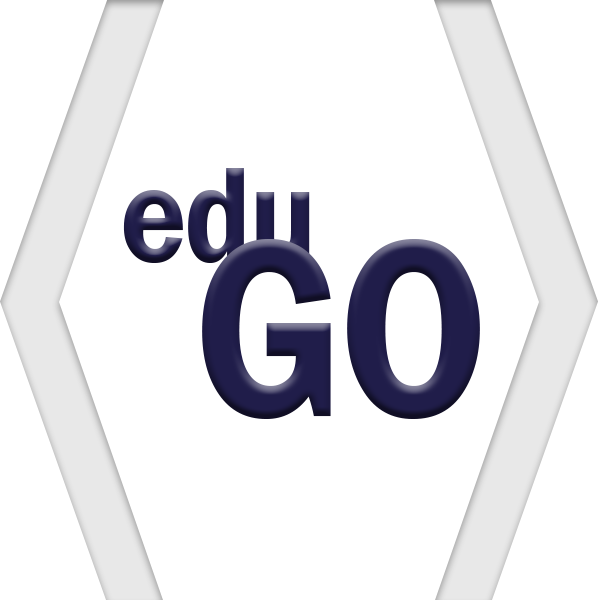
<style>
.page{position:relative;width:600px;height:600px;background:#ffffff}
.page>*{position:absolute;margin:0}
.t1{font:140px "FranklinGothic-Demi";letter-spacing:-0.02em;color:#201d4a;scale:0.89 1}
.t2{font:261.3px "FranklinGothic-Demi";letter-spacing:-0.02em;color:#201d4a;scale:0.89 1}
</style>
<div class="page">
<p class="t1" style="left:123px;top:168px;width:187px;height:95px">edu</p>
<p class="t2" style="left:202px;top:239px;width:278px;height:180px">GO</p>
</div>
